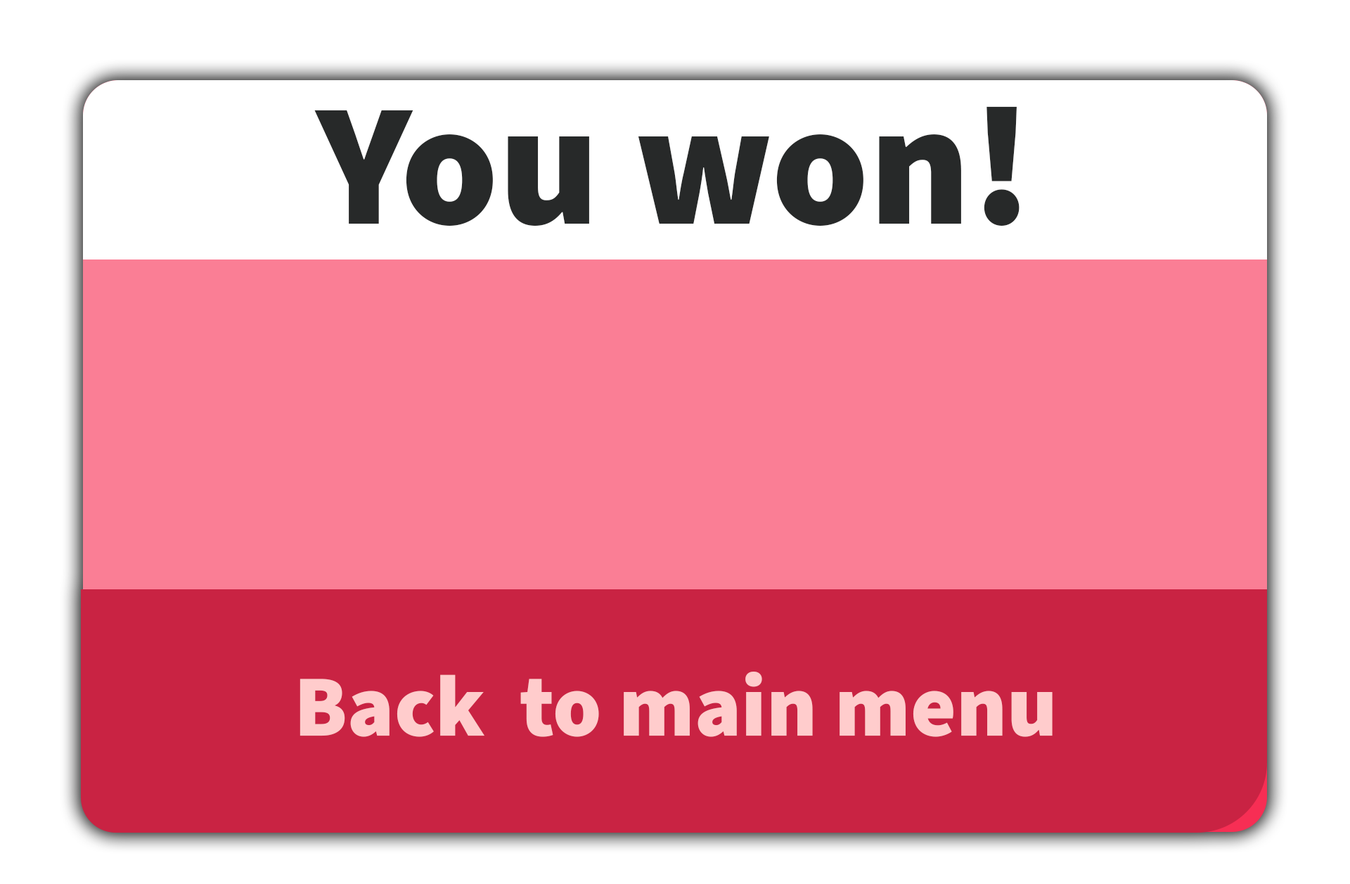
<style>
.page{position:relative;width:1350px;height:884px;background:#ffffff}
.page>*{position:absolute;margin:0}
.t1{font:174.2px "SourceSans3Roman-Black";color:#272929}
.t2{font:87.1px "SourceSans3Roman-Black";color:#ffcccc}
</style>
<div class="page">
<p class="t1" style="left:314px;top:106px;width:705px;height:120px">You won!</p>
<p class="t2" style="left:299px;top:671px;width:753px;height:66px">Back  to main menu</p>
</div>
